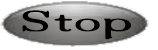
<style>
.page{position:relative;width:158px;height:50px;background:#ffffff}
.page>*{position:absolute;margin:0}
.t1{font:41.5px "18thCentury";color:#000000;scale:1.79 1}
</style>
<div class="page">
<p class="t1" style="left:22px;top:10px;width:109px;height:30px">Stop</p>
</div>
